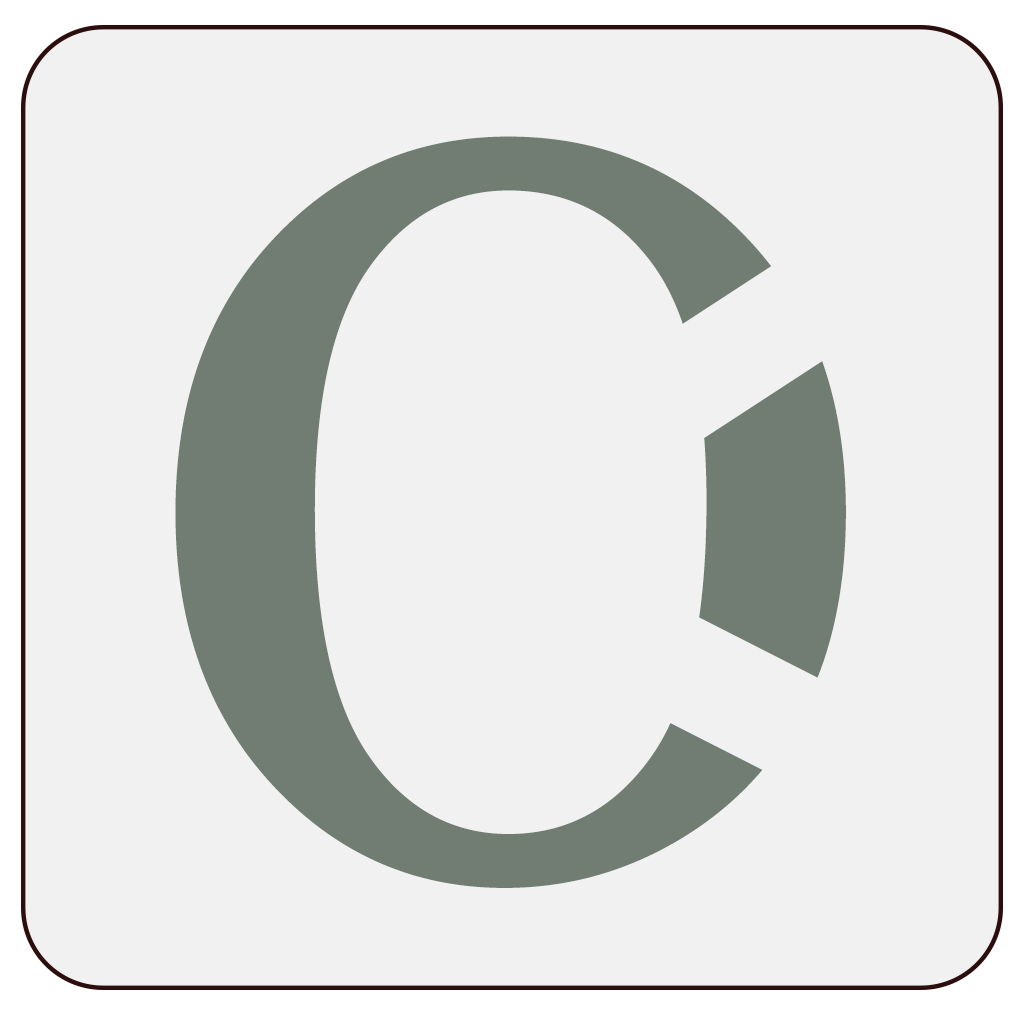
<style>
.page{position:relative;width:1024px;height:1024px;background:#f1f1f1}
.page>*{position:absolute;margin:0}
.t1{font:1549.4px "Century";color:#717d73}
</style>
<div class="page">
<p class="t1" style="left:175px;top:136px;width:671px;height:752px">о</p>
</div>
